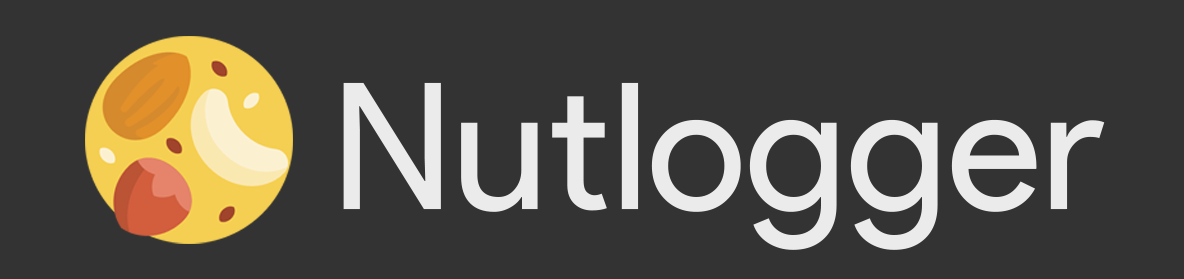
<style>
.page{position:relative;width:1184px;height:279px;background:#333333}
.page>*{position:absolute;margin:0}
.t1{font:176px "ProductSans-Regular";color:#ebebeb}
</style>
<div class="page">
<p class="t1" style="left:343px;top:82px;width:762px;height:168px">Nutlogger</p>
</div>
